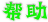
<style>
.page{position:relative;width:48px;height:22px}
.page>*{position:absolute;margin:0}
.t1{font:24.3px "GraveBustedStoneLishuSCRoughlyC";color:#0ffc03;scale:0.97 1}
</style>
<div class="page">
<p class="t1" style="left:2px;top:2px;width:45px;height:19px;rotate:-1deg">帮助</p>
</div>
